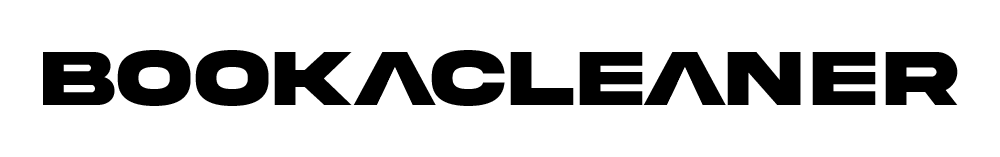
<style>
.page{position:relative;width:1000px;height:157px;background:#ffffff}
.page>*{position:absolute;margin:0}
.t1{font:81.2px "AkiraExpanded-SuperBold";color:#000000}
</style>
<div class="page">
<p class="t1" style="left:43px;top:50px;width:915px;height:56px">BOOKACLEANER</p>
</div>
